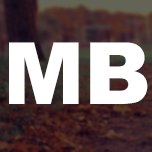
<style>
.page{position:relative;width:152px;height:152px;background:#ffffff}
.page>*{position:absolute;margin:0}
.t1{font:86px "Arial-Black";color:#ffffff}
</style>
<div class="page">
<p class="t1" style="left:9px;top:42px;width:139px;height:62px">MB</p>
</div>
